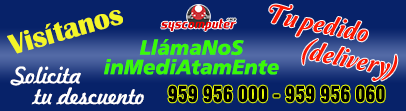
<style>
.page{position:relative;width:406px;height:111px;background:#072269}
.page>*{position:absolute;margin:0}
.t1{font:27.7px "Amperzand";color:#fb1901}
.t2{font:28.9px "BritannicBold";color:#f3f527}
.t3{font:20.5px/19.5px "Humanist777BT-BlackItalicB";color:#3afa07}
.t4{font:21.9px/20.8px "Freehand521BT-RegularC";color:#ffffff}
.t5{font:21.4px "Swiss721BT-BlackCondensed";color:#000000;scale:0.87 1}
</style>
<div class="page">
<p class="t1" style="left:269px;top:4px;width:99px;height:38px;rotate:11deg">Tu pedido</p>
<p class="t2" style="left:7px;top:10px;width:116px;height:44px;rotate:-16deg">Visítanos</p>
<p class="t3" style="left:104px;top:39px;width:175px;height:36px;text-align:center">LlámaNoS<br>inMediAtamEnte</p>
<p class="t1" style="left:302px;top:39px;width:96px;height:42px;rotate:11deg">(delivery)</p>
<p class="t4" style="left:10px;top:66px;width:134px;height:39px;text-align:center">Solicita<br>               tu descuento</p>
<p class="t5" style="left:168px;top:85px;width:217px;height:18px">959 956 000 - 959 956 060</p>
</div>
